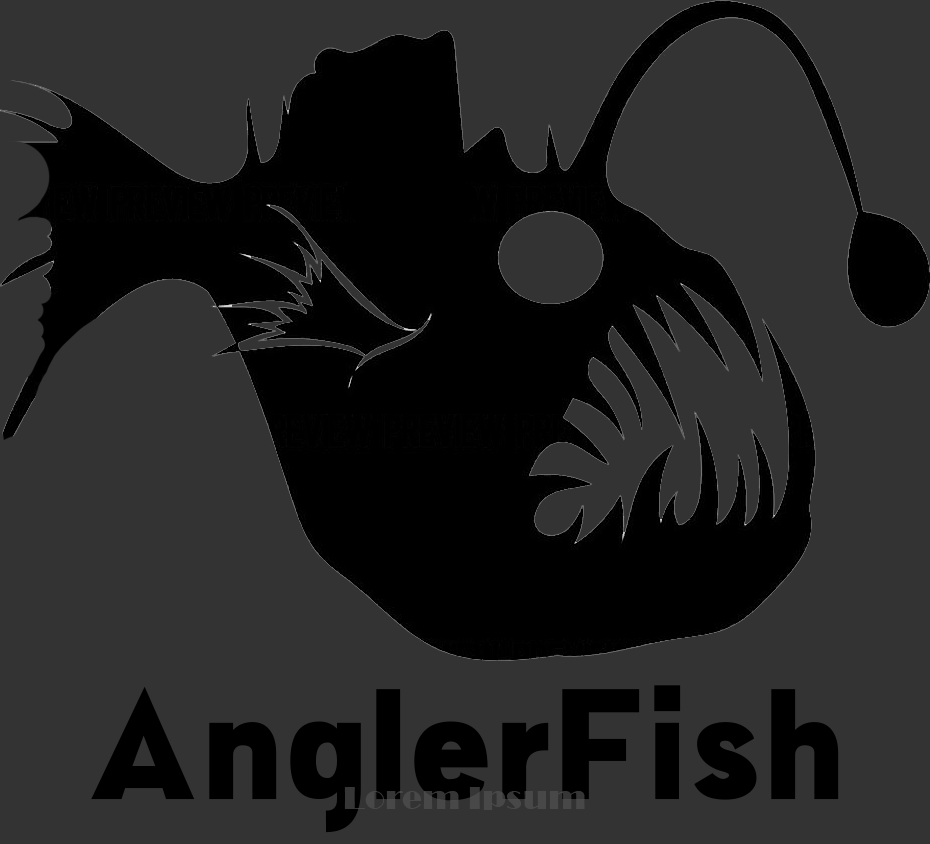
<style>
.page{position:relative;width:930px;height:844px;background:#333333}
.page>*{position:absolute;margin:0}
.t1{font:150.1px "NEWSFLASH";color:#000000}
.t2{font:33.3px "Broadway";color:#484848}
</style>
<div class="page">
<p class="t1" style="left:91px;top:685px;width:748px;height:148px">AnglerFish</p>
<p class="t2" style="left:344px;top:787px;width:241px;height:23px">Lorem Ipsum</p>
</div>
